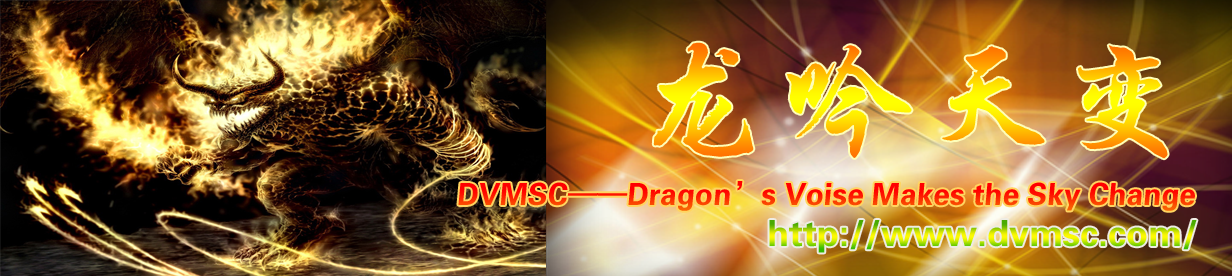
<style>
.page{position:relative;width:1232px;height:276px}
.page>*{position:absolute;margin:0}
.t1{font:139.5px "ç»å¸è¡æ¥·ç®-regular"}
.t2{font:30.7px "FZZYJW--GB1-0"}
.t3{font:36px "FZZYJW--GB1-0"}
</style>
<div class="page">
<p class="t1" style="left:653px;top:42px;width:515px;height:117px">龙吟天变</p>
<p class="t2" style="left:458px;top:181px;width:737px;height:30px">DVMSC——Dragon’s Voise Makes the Sky Change</p>
<p class="t3" style="left:769px;top:220px;width:428px;height:33px">http://www.dvmsc.com/</p>
</div>
